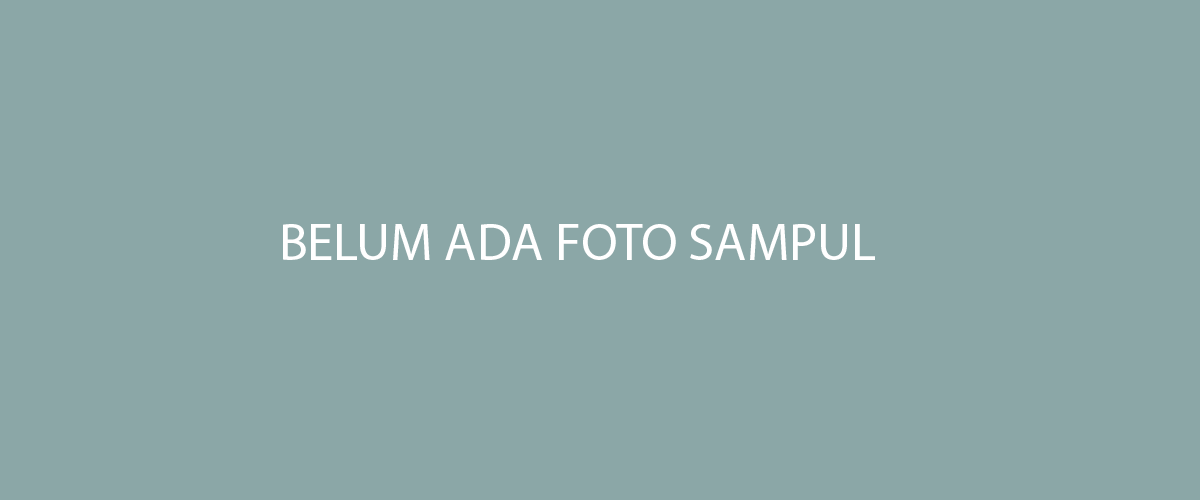
<style>
.page{position:relative;width:1200px;height:500px;background:#8ba7a7}
.page>*{position:absolute;margin:0}
.t1{font:52.9px "MyriadHebrew-Regular";color:#ffffff}
</style>
<div class="page">
<p class="t1" style="left:283px;top:224px;width:592px;height:36px">BELUM ADA FOTO SAMPUL</p>
</div>
